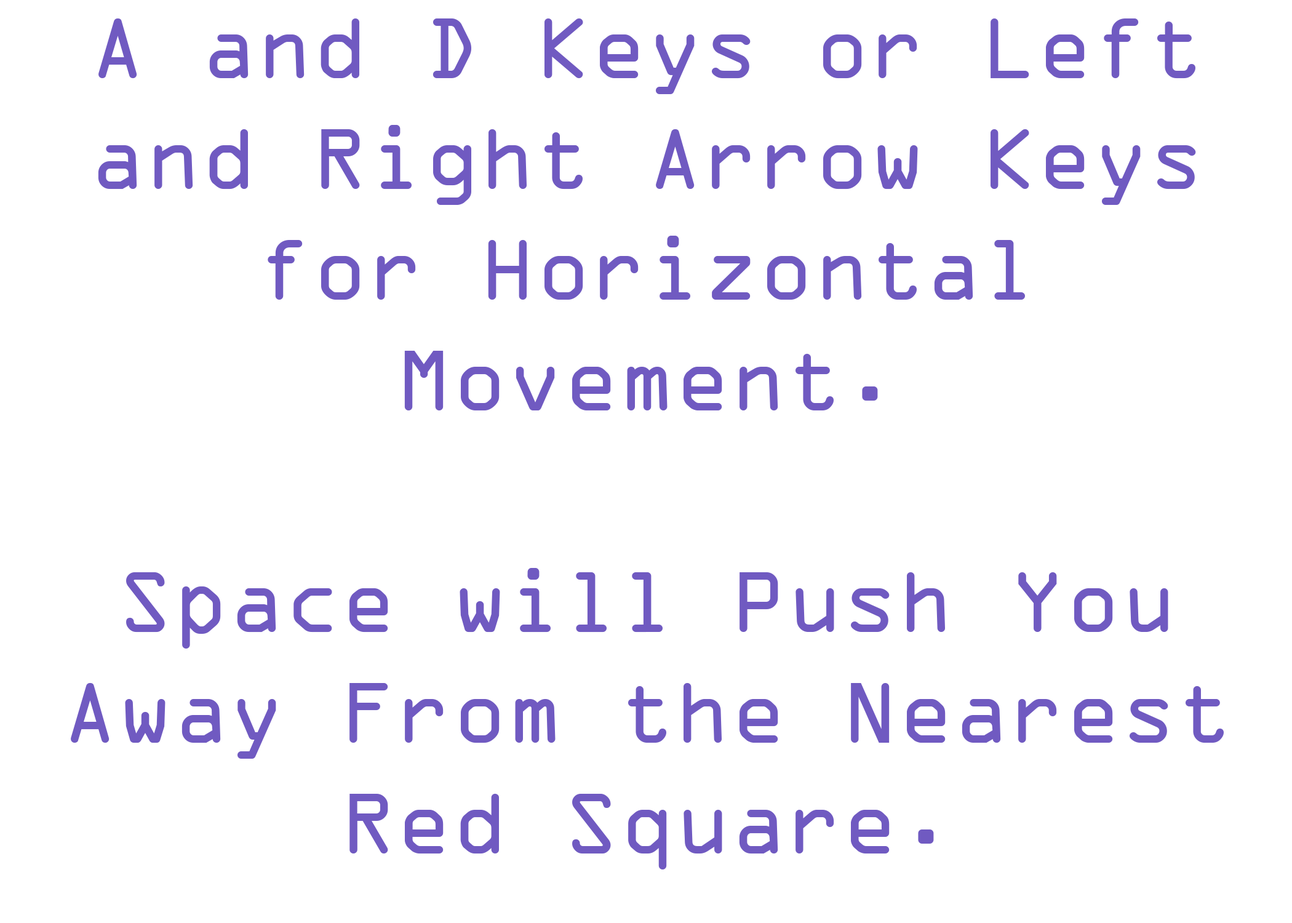
<style>
.page{position:relative;width:1292px;height:923px;background:#ffffff}
.page>*{position:absolute;margin:0}
.t1{font:92.3px "OCRAExtended";color:#705ac1}
</style>
<div class="page">
<p class="t1" style="left:71px;top:18px;width:1153px;height:851px;text-align:center">A and D Keys or Left and Right Arrow Keys for Horizontal Movement.  <br><br>Space will Push You Away From the Nearest Red Square.</p>
</div>
